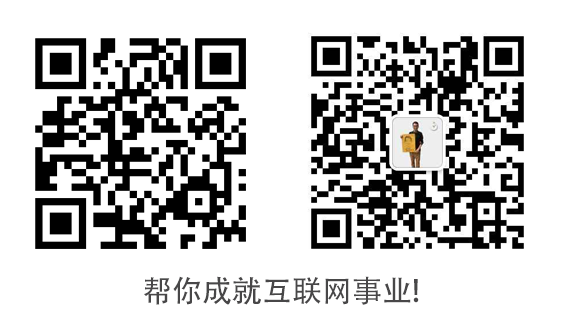
<style>
.page{position:relative;width:567px;height:335px;background:#ffffff}
.page>*{position:absolute;margin:0}
.t1{font:30px "AdobeHeitiStd-Regular";color:#484748}
</style>
<div class="page">
<p class="t1" style="left:144px;top:276px;width:275px;height:29px">帮你成就互联网事业!</p>
</div>
